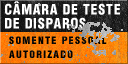
<style>
.page{position:relative;width:128px;height:64px}
.page>*{position:absolute;margin:0}
.t1{font:14px/14px "HelveticaLT-Condensed-Black";letter-spacing:0.05em;color:#ffffff}
.t2{font:10px/14px "HelveticaLT-Condensed-Black";letter-spacing:0.13em;color:#000000}
</style>
<div class="page">
<p class="t1" style="left:5px;top:1px;width:115px;height:28px">CÂMARA DE TESTE<br>DE DISPAROS</p>
<p class="t2" style="left:9px;top:36px;width:98px;height:22px">SOMENTE PESSOAL<br>AUTORIZADO</p>
</div>
